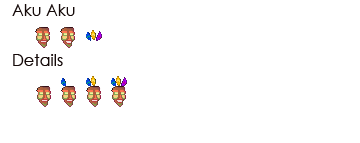
<style>
.page{position:relative;width:360px;height:143px;background:#ffffff}
.page>*{position:absolute;margin:0}
.t1{font:16px "CenturyGothic";color:#150a09}
</style>
<div class="page">
<p class="t1" style="left:12px;top:4px;width:63px;height:12px">Aku Aku</p>
<p class="t1" style="left:13px;top:54px;width:50px;height:12px">Details</p>
</div>
